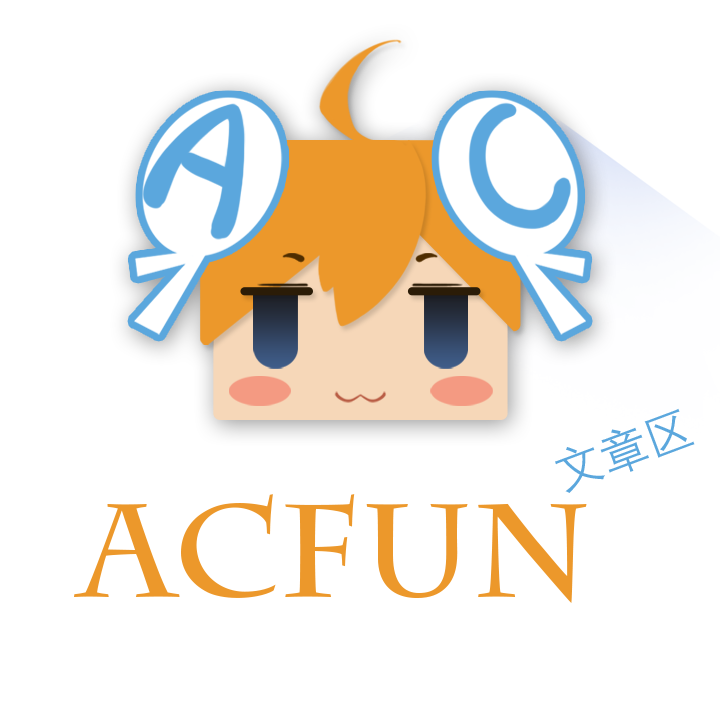
<style>
.page{position:relative;width:720px;height:720px;background:#ffffff}
.page>*{position:absolute;margin:0}
.t1{font:48px "FZDX--GB1-4";color:#5ba7dd}
.t2{font:130px "CharlemagneStd-Bold";color:#ec982b}
</style>
<div class="page">
<p class="t1" style="left:555px;top:408px;width:140px;height:85px;rotate:-20deg">文章区</p>
<p class="t2" style="left:74px;top:494px;width:513px;height:109px">AcFun</p>
</div>
